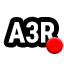
<style>
.page{position:relative;width:64px;height:64px;background:#ffffff}
.page>*{position:absolute;margin:0}
.t1{font:28.7px "RobotoCondensed-Bold";color:#ffffff}
</style>
<div class="page">
<p class="t1" style="left:8px;top:21px;width:47px;height:22px">A3R</p>
</div>
